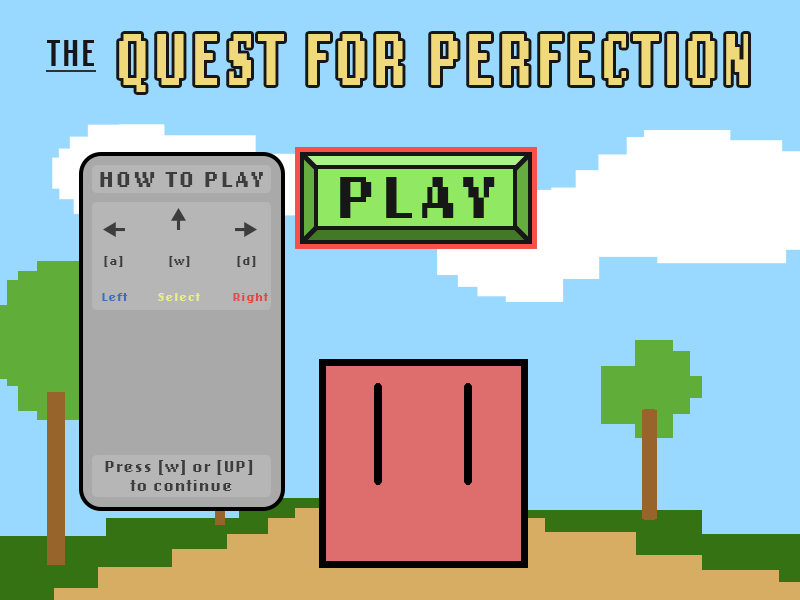
<style>
.page{position:relative;width:800px;height:600px;background:#99d8ff}
.page>*{position:absolute;margin:0}
.t1{font:23.4px "LoRes12OT-Bold";letter-spacing:0.07em;color:#3d3d3d}
.t2{font:62.4px "LoRes12OT-Bold";letter-spacing:0.07em;color:#171717}
.t3{font:12px "LoRes12OT-Bold";letter-spacing:0.07em;color:#3d3d3d}
.t4{font:12px "LoRes12OT-Bold";letter-spacing:0.07em;color:#3a6ec5}
.t5{font:12px "LoRes12OT-Bold";letter-spacing:0.07em;color:#e8ee8a}
.t6{font:12px "LoRes12OT-Bold";letter-spacing:0.07em;color:#e14848}
.t7{font:15.6px "LoRes12OT-Bold";letter-spacing:0.07em;color:#3d3d3d}
</style>
<div class="page">
<p class="t1" style="left:100px;top:172px;width:163px;height:15px">HOW TO PLAY</p>
<p class="t2" style="left:340px;top:177px;width:155px;height:41px">PLAY</p>
<p class="t3" style="left:104px;top:256px;width:19px;height:11px">[a]</p>
<p class="t3" style="left:169px;top:256px;width:21px;height:11px">[w]</p>
<p class="t3" style="left:237px;top:256px;width:19px;height:11px">[d]</p>
<p class="t4" style="left:102px;top:293px;width:26px;height:8px">Left</p>
<p class="t5" style="left:158px;top:293px;width:42px;height:8px">Select</p>
<p class="t6" style="left:233px;top:293px;width:35px;height:10px">Right</p>
<p class="t7" style="left:105px;top:460px;width:148px;height:31px;text-align:center">Press [w] or [UP] <br>to continue</p>
</div>
